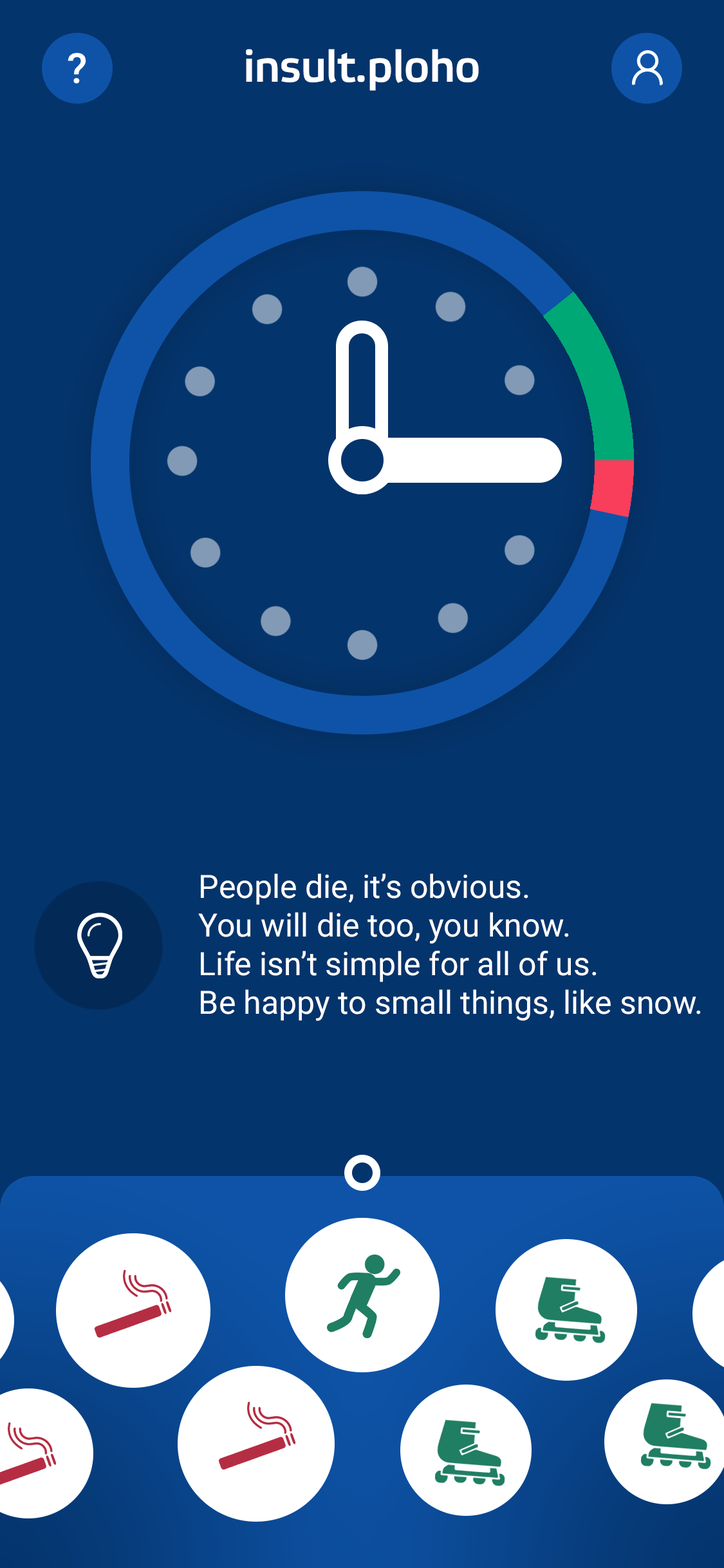
<style>
.page{position:relative;width:724px;height:1568px;background:#04346c}
.page>*{position:absolute;margin:0}
.t1{font:45.1px "ElektraMediumPro";letter-spacing:-0.02em;color:#ffffff}
.t2{font:32.2px "Roboto-Regular";color:#ffffff}
</style>
<div class="page">
<p class="t1" style="left:246px;top:49px;width:233px;height:42px">insult.ploho</p>
<p class="t2" style="left:198px;top:873px;width:503px;height:148px">People die, it’s obvious.<br>You will die too, you know.<br>Life isn’t simple for all of us.<br>Be happy to small things, like snow.</p>
</div>
